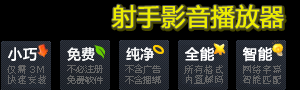
<style>
.page{position:relative;width:300px;height:90px;background:#000000}
.page>*{position:absolute;margin:0}
.t1{font:24px "MicrosoftYaHei";color:#ecec00;font-weight:bold}
.t2{font:14px "MicrosoftYaHei";letter-spacing:0.05em;color:#ffffff;font-weight:bold}
.t3{font:10px/10px "SimSun";color:#666666}
.t4{font:9px/10px "Verdana";color:#666666}
</style>
<div class="page">
<p class="t1" style="left:112px;top:4px;width:172px;height:25px">射手影音播放器</p>
<p class="t2" style="left:8px;top:47px;width:29px;height:14px">小巧</p>
<p class="t2" style="left:185px;top:46px;width:29px;height:15px">全能</p>
<p class="t2" style="left:242px;top:46px;width:30px;height:16px">智能</p>
<p class="t3" style="left:7px;top:65px;width:39px;height:19px">仅需 <span class="t4">3M<br></span>快速安装</p>
<p class="t3" style="left:184px;top:65px;width:39px;height:19px">所有格式<br>内置解码</p>
<p class="t3" style="left:243px;top:65px;width:38px;height:19px">网络字幕<br>智能匹配</p>
</div>
